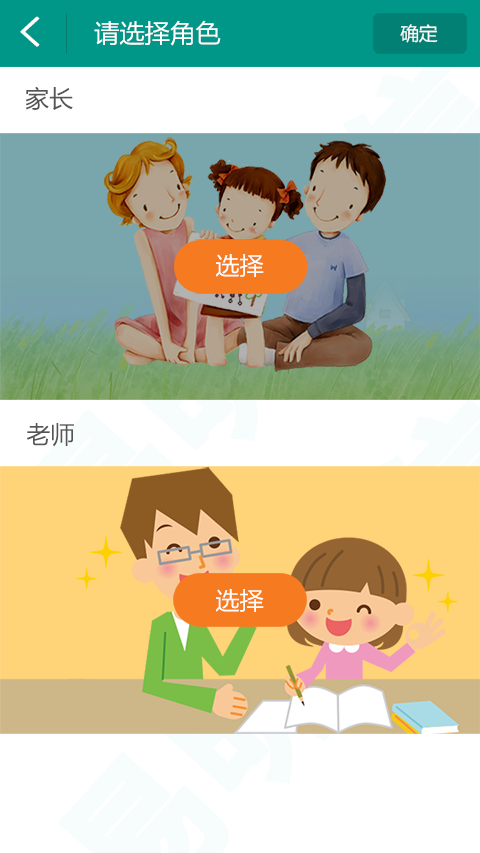
<style>
.page{position:relative;width:480px;height:853px;background:#ffffff}
.page>*{position:absolute;margin:0}
.t1{font:41.3px "SimHei";color:#ffffff;font-weight:bold}
.t2{font:25.3px "MicrosoftYaHei";color:#ffffff}
.t3{font:18.7px "MicrosoftYaHei";color:#ffffff}
.t4{font:24px "MicrosoftYaHei";color:#555555}
.t5{font:24px "MicrosoftYaHei";color:#ffffff}
</style>
<div class="page">
<p class="t1" style="left:20px;top:16px;width:20px;height:31px">&lt;</p>
<p class="t2" style="left:94px;top:20px;width:127px;height:26px">请选择角色</p>
<p class="t3" style="left:400px;top:24px;width:38px;height:19px">确定</p>
<p class="t4" style="left:25px;top:86px;width:48px;height:24px">家长</p>
<p class="t5" style="left:215px;top:254px;width:49px;height:23px">选择</p>
<p class="t4" style="left:27px;top:423px;width:47px;height:24px">老师</p>
<p class="t5" style="left:215px;top:589px;width:49px;height:23px">选择</p>
</div>
